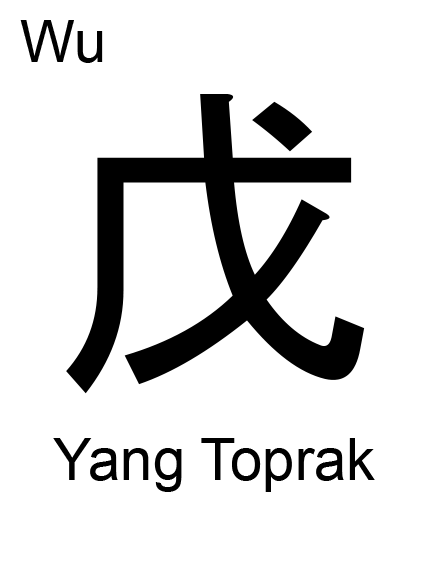
<style>
.page{position:relative;width:429px;height:563px;background:#ffffff}
.page>*{position:absolute;margin:0}
.t1{font:58.3px "ArialMT";color:#000000}
.t2{font:333.3px "MS-Gothic";color:#000000}
</style>
<div class="page">
<p class="t1" style="left:20px;top:20px;width:83px;height:43px">Wu</p>
<p class="t2" style="left:66px;top:94px;width:299px;height:300px">戊</p>
<p class="t1" style="left:53px;top:438px;width:322px;height:54px">Yang Toprak</p>
</div>
